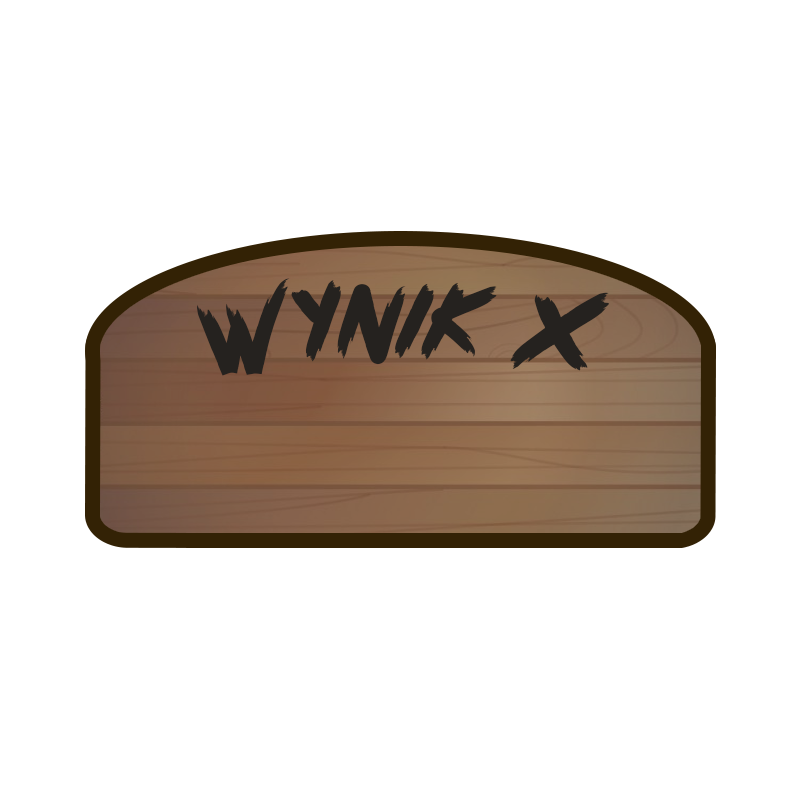
<style>
.page{position:relative;width:800px;height:800px;background:#ffffff}
.page>*{position:absolute;margin:0}
.t1{font:119.5px "PinkBlue";color:#25221f}
.t2{font:141.7px "PinkBlue";color:#25221f}
</style>
<div class="page">
<p class="t1" style="left:197px;top:278px;width:412px;height:98px;rotate:1deg">wynik <span class="t2">X</span></p>
</div>
